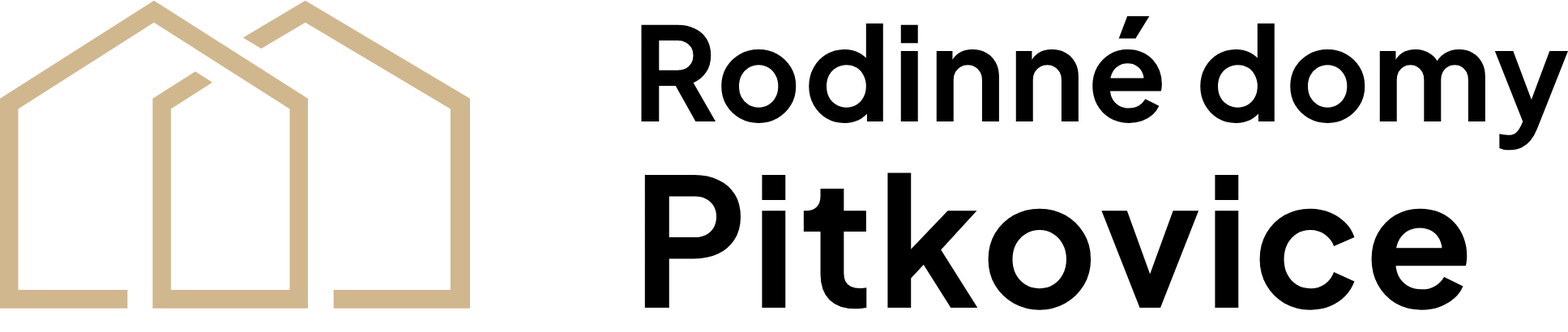
<style>
.page{position:relative;width:1568px;height:332px;background:#ffffff}
.page>*{position:absolute;margin:0}
.t1{font:129.7px "PlusJakartaSans-Bold";letter-spacing:0.02em;color:#000000}
.t2{font:178.3px "PlusJakartaSans-Bold";letter-spacing:0.02em;color:#000000}
</style>
<div class="page">
<p class="t1" style="left:641px;top:15px;width:927px;height:136px">Rodinné domy</p>
<p class="t2" style="left:644px;top:173px;width:824px;height:137px">Pitkovice</p>
</div>
